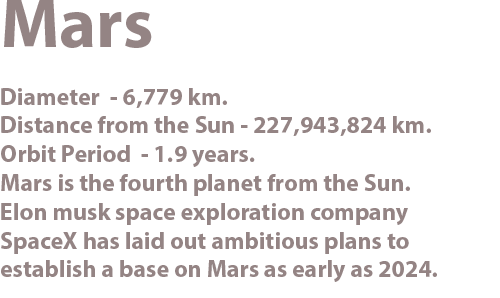
<style>
.page{position:relative;width:500px;height:298px;background:#ffffff}
.page>*{position:absolute;margin:0}
.t1{font:24px "MyriadHebrew-Bold";color:#887777}
.t2{font:70px "MyriadHebrew-Bold";color:#887777}
</style>
<div class="page">
<p class="t1" style="left:1px;top:0px;width:436px;height:282px;text-align:right;opacity:0.9"><span class="t2">Mars<br></span><br>Diameter  - 6,779 km.<br>Distance from the Sun - 227,943,824 km.<br>Orbit Period  - 1.9 years.<br>Mars is the fourth planet from the Sun.<br>Elon musk space exploration company<br>SpaceX has laid out ambitious plans to<br>establish a base on Mars as early as 2024.</p>
</div>
